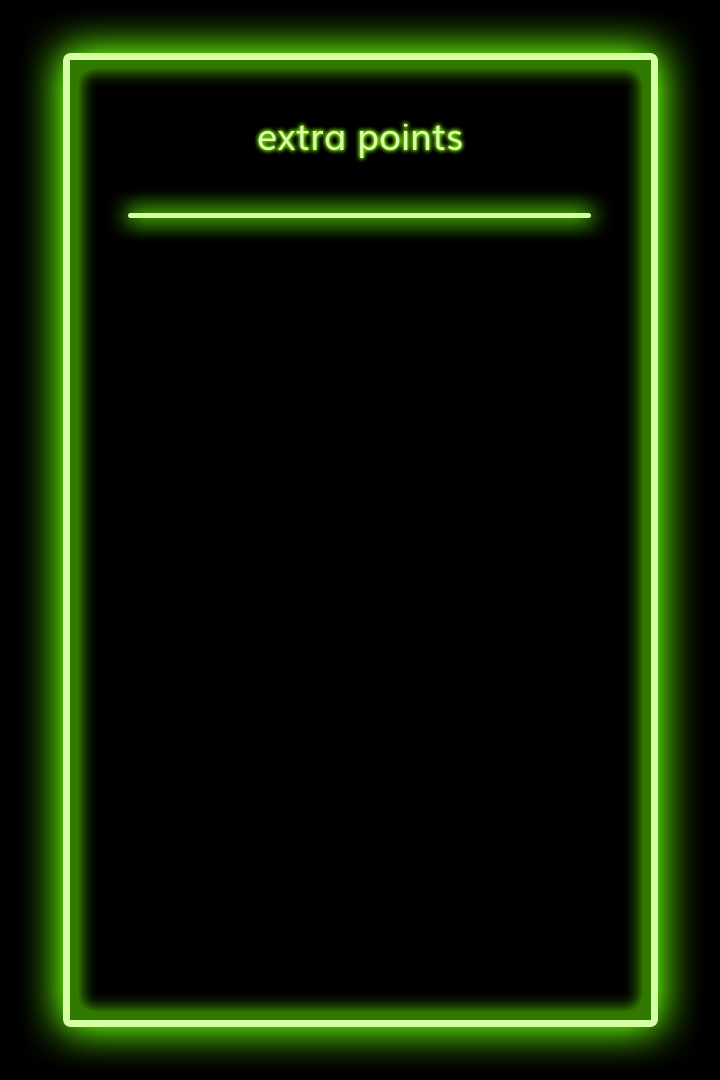
<style>
.page{position:relative;width:720px;height:1080px;background:#000000}
.page>*{position:absolute;margin:0}
.t1{font:36px "Muli";color:#d5ffa4}
</style>
<div class="page">
<p class="t1" style="left:258px;top:124px;width:204px;height:34px">extra points</p>
</div>
